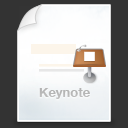
<style>
.page{position:relative;width:128px;height:128px;background:#333333}
.page>*{position:absolute;margin:0}
.t1{font:13px "HelveticaNeue-Bold";color:#cccccc}
</style>
<div class="page">
<p class="t1" style="left:39px;top:88px;width:51px;height:11px">Keynote</p>
</div>
